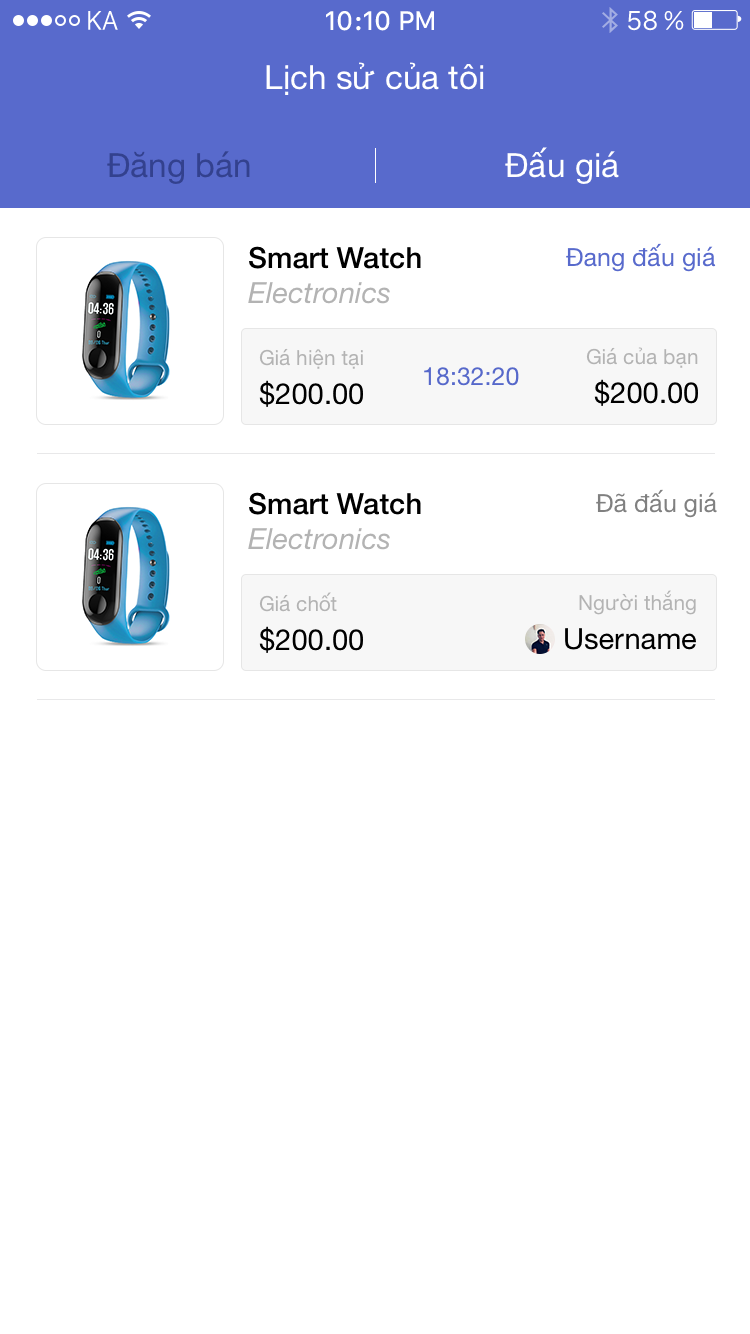
<style>
.page{position:relative;width:750px;height:1334px;background:#ffffff}
.page>*{position:absolute;margin:0}
.t1{font:33.3px "HelveticaNeue";color:#ffffff}
.t2{font:33.3px "HelveticaNeue";color:#33418e}
.t3{font:29.2px/29.2px "HelveticaNeue-Medium";color:#000000}
.t4{font:29.2px "HelveticaNeue-Italic";color:#b3b3b3}
.t5{font:25px "HelveticaNeue";color:#586acc}
.t6{font:20.8px "HelveticaNeue";color:#b3b3b3}
.t7{font:25px "HelveticaNeue";color:#5668ca}
.t8{font:29.2px "HelveticaNeue";color:#000000}
.t9{font:25px "HelveticaNeue";color:#808080}
</style>
<div class="page">
<p class="t1" style="left:266px;top:62px;width:218px;height:33px">Lịch sử của tôi</p>
<p class="t1" style="left:505px;top:147px;width:114px;height:37px">Đấu giá</p>
<p class="t2" style="left:107px;top:151px;width:143px;height:33px">Đăng bán</p>
<p class="t3" style="left:248px;top:246px;width:173px;height:58px">Smart Watch<br><span class="t4">Electronics</span></p>
<p class="t5" style="left:566px;top:243px;width:150px;height:29px">Đang đấu giá</p>
<p class="t6" style="left:259px;top:348px;width:104px;height:21px">Giá hiện tại</p>
<p class="t6" style="left:586px;top:347px;width:112px;height:21px">Giá của bạn</p>
<p class="t7" style="left:424px;top:367px;width:95px;height:19px">18:32:20</p>
<p class="t8" style="left:259px;top:380px;width:104px;height:27px">$200.00</p>
<p class="t8" style="left:594px;top:379px;width:104px;height:27px">$200.00</p>
<p class="t3" style="left:248px;top:492px;width:173px;height:58px">Smart Watch<br><span class="t4">Electronics</span></p>
<p class="t9" style="left:596px;top:489px;width:121px;height:29px">Đã đấu giá</p>
<p class="t6" style="left:259px;top:592px;width:78px;height:20px">Giá chốt</p>
<p class="t6" style="left:579px;top:590px;width:117px;height:25px">Người thắng</p>
<p class="t8" style="left:259px;top:626px;width:104px;height:27px">$200.00</p>
<p class="t8" style="left:565px;top:628px;width:131px;height:22px">Username</p>
</div>
